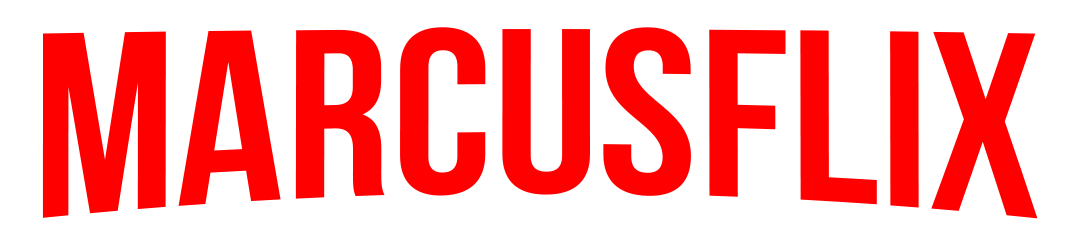
<style>
.page{position:relative;width:1080px;height:246px;background:#ffffff}
.page>*{position:absolute;margin:0}
.t1{font:264.8px "BebasNeue";color:#ff0000}
</style>
<div class="page">
<p class="t1" style="left:42px;top:27px;width:996px;height:192px">MARCUSFLIX</p>
</div>
